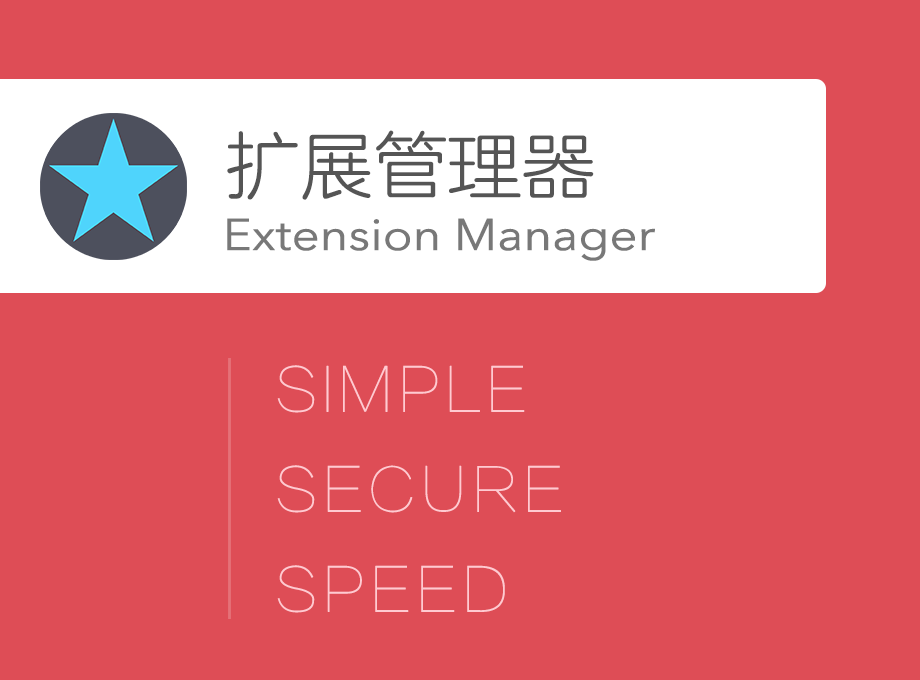
<style>
.page{position:relative;width:920px;height:680px;background:#de4d56}
.page>*{position:absolute;margin:0}
.t1{font:72px "FZLANTY_XIANJW--GB1-0";color:#555555;font-weight:bold}
.t2{font:44.1px "AvenirNext-Regular";letter-spacing:-0.02em;color:#787878;font-weight:bold;scale:1.1 1}
.t3{font:60px/100px "FZLTCXHJW--GB1-0";color:#ffcad1;font-weight:bold}
</style>
<div class="page">
<p class="t1" style="left:227px;top:130px;width:367px;height:70px">扩展管理器</p>
<p class="t2" style="left:227px;top:218px;width:428px;height:43px">Extension Manager</p>
<p class="t3" style="left:277px;top:365px;width:284px;height:248px">SIMPLE<br>SECURE<br>SPEED</p>
</div>
